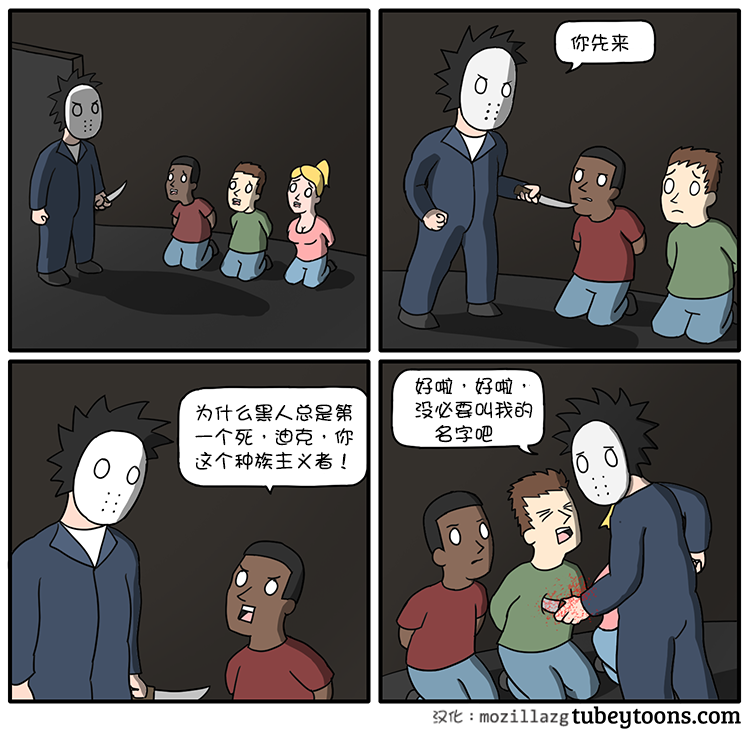
<style>
.page{position:relative;width:750px;height:735px}
.page>*{position:absolute;margin:0}
.t1{font:20px "DFGirl";color:#000000}
.t2{font:20px/24px "DFGirl";color:#000000}
</style>
<div class="page">
<p class="t1" style="left:570px;top:33px;width:59px;height:19px">你先来</p>
<p class="t2" style="left:415px;top:377px;width:118px;height:66px">好啦，好啦，<br>没必要叫我的<br>   名字吧</p>
<p class="t2" style="left:195px;top:404px;width:158px;height:66px">为什么黑人总是第<br>一个死，迪克，你<br>这个种族主义者！</p>
</div>
